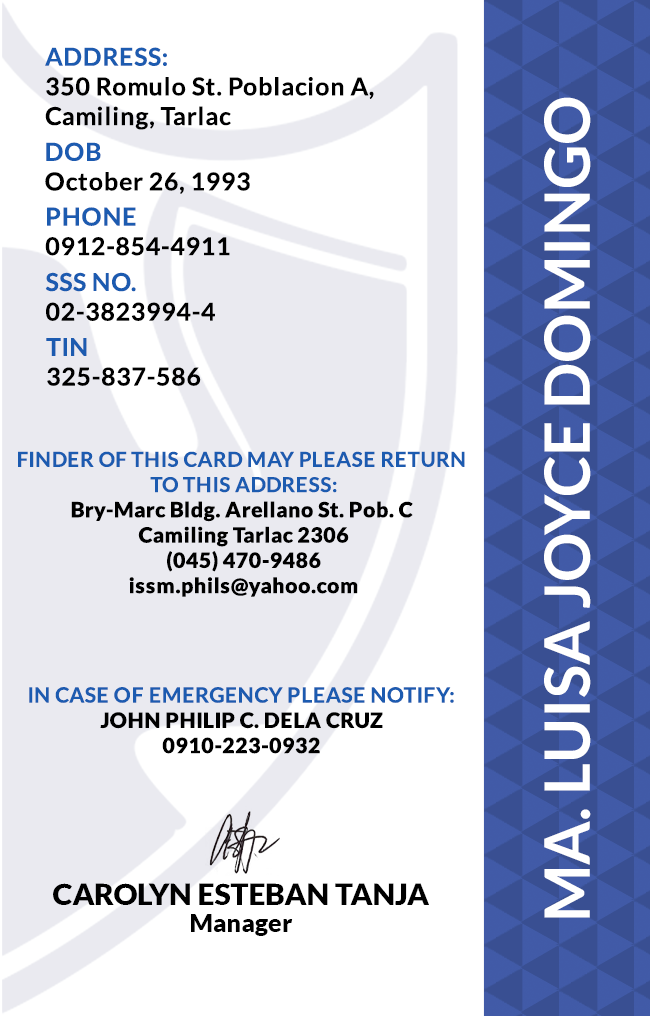
<style>
.page{position:relative;width:650px;height:1016px;background:#ffffff}
.page>*{position:absolute;margin:0}
.t1{font:24.7px/29.6px "Lato-Bold";letter-spacing:0.025em;color:#000000}
.t2{font:62.5px "Lato-Bold";color:#ffffff}
.t3{font:24.7px/29.6px "Lato-Bold";letter-spacing:0.025em}
.t4{font:21.1px "Lato-Black";letter-spacing:0.025em}
.t5{font:20.5px/25.3px "Lato-Bold";letter-spacing:0.025em;text-transform:uppercase}
.t6{font:21.1px/25.3px "Lato-Bold";letter-spacing:0.025em}
.t7{font:29.5px "Lato-Black";color:#000000}
.t8{font:25px "Lato-Black";color:#000000}
</style>
<div class="page">
<p class="t1" style="left:45px;top:47px;width:329px;height:83px">ADDRESS:<br>350 Romulo St. Poblacion A,<br>Camiling, Tarlac</p>
<p class="t2" style="left:544px;top:97px;width:47px;height:821px;rotate:-90deg">MA. LUISA JOYCE DOMINGO</p>
<p class="t1" style="left:45px;top:142px;width:205px;height:52px">DOB<br>October 26, 1993</p>
<p class="t3" style="left:45px;top:207px;width:185px;height:49px">PHONE <br>0912-854-4911</p>
<p class="t3" style="left:45px;top:272px;width:170px;height:49px">SSS NO.<br>02-3823994-4</p>
<p class="t1" style="left:46px;top:338px;width:155px;height:48px">TIN<br>325-837-586</p>
<p class="t4" style="left:18px;top:451px;width:447px;height:146px;text-align:center"><span class="t5">Finder of this card may please return <br>to this address:<br></span>Bry-Marc Bldg. Arellano St. Pob. C <br>Camiling Tarlac 2306<br>(045) 470-9486<br>issm.phils@yahoo.com</p>
<p class="t4" style="left:29px;top:687px;width:425px;height:67px;text-align:center"><span class="t6">IN CASE OF EMERGENCY PLEASE NOTIFY:<br></span>JOHN PHILIP C. DELA CRUZ<br>0910-223-0932</p>
<p class="t7" style="left:53px;top:883px;width:376px;height:22px">CAROLYN ESTEBAN TANJA</p>
<p class="t8" style="left:191px;top:914px;width:102px;height:22px">Manager</p>
</div>
